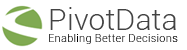
<style>
.page{position:relative;width:187px;height:50px;background:#ffffff}
.page>*{position:absolute;margin:0}
.t1{font:11px/12px "Roboto-Light";letter-spacing:0.025em;color:#000000}
.t2{font:30px/20px "Roboto-Light";letter-spacing:0.005em;color:#434343}
</style>
<div class="page">
<p class="t1" style="left:49px;top:7px;width:129px;height:37px"><span class="t2">PivotData<br></span>Enabling Better Decisions</p>
</div>
